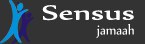
<style>
.page{position:relative;width:145px;height:44px;background:#333333}
.page>*{position:absolute;margin:0}
.t1{font:25px "Nyala-Regular";color:#fefefe;scale:1.49 1}
.t2{font:16px "Nyala-Regular";color:#ffffff;scale:0.91 1}
</style>
<div class="page">
<p class="t1" style="left:42px;top:5px;width:92px;height:16px">Sensus</p>
<p class="t2" style="left:96px;top:24px;width:38px;height:15px">jamaah</p>
</div>
